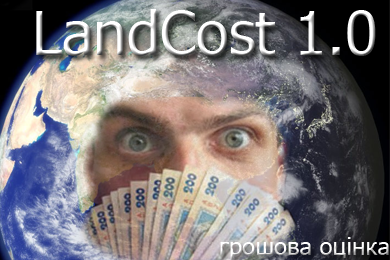
<style>
.page{position:relative;width:390px;height:260px}
.page>*{position:absolute;margin:0}
.t1{font:60px "Tahoma"}
.t2{font:24px "Tahoma";color:#ffffff}
</style>
<div class="page">
<p class="t1" style="left:36px;top:9px;width:340px;height:47px">LandCost 1.0</p>
<p class="t2" style="left:220px;top:237px;width:169px;height:23px">грошова оцінка</p>
</div>
